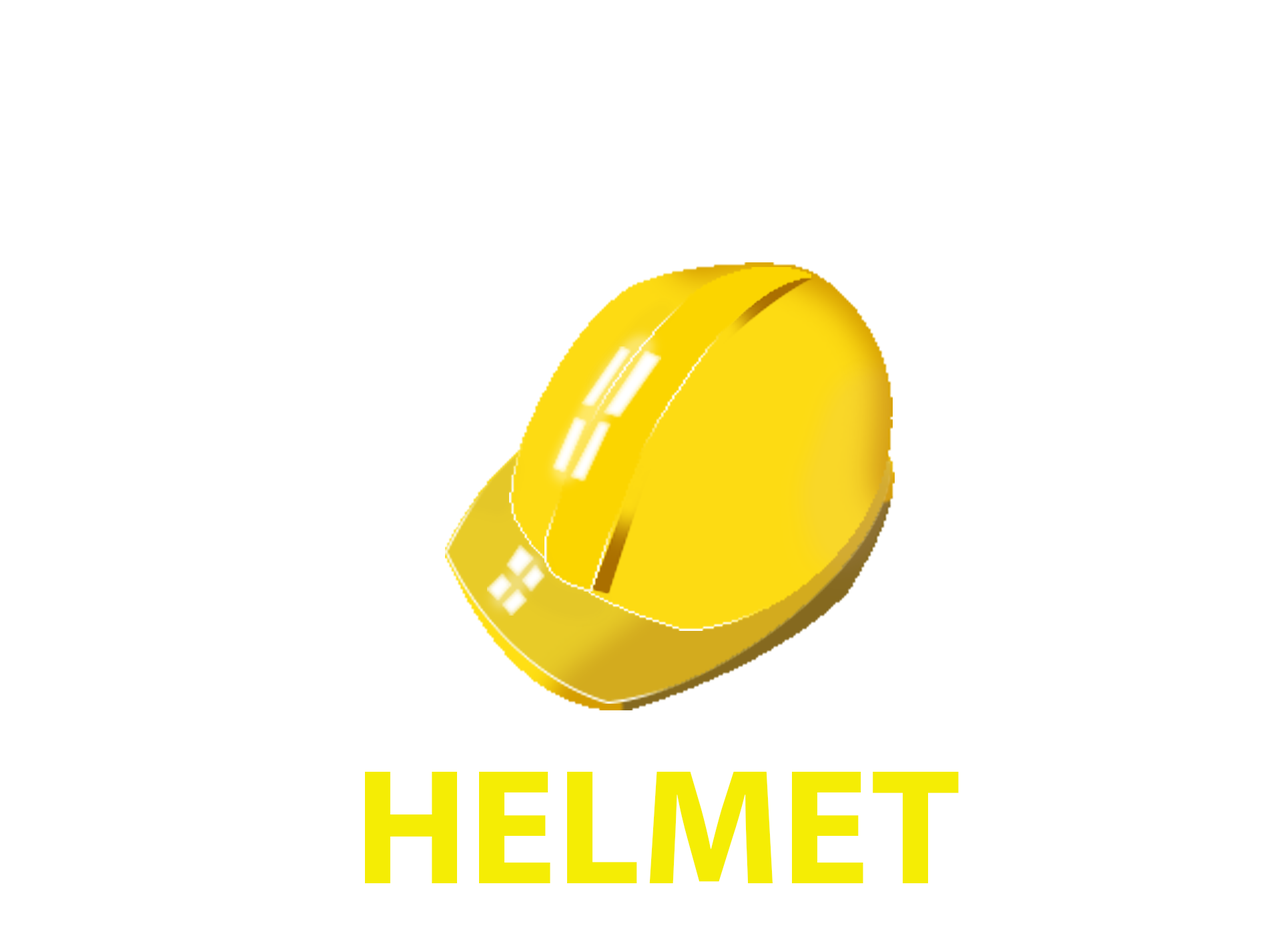
<style>
.page{position:relative;width:1261px;height:946px;background:#ffffff}
.page>*{position:absolute;margin:0}
.t1{font:165.4px "MyriadPro-Bold";color:#f5ed04}
</style>
<div class="page">
<p class="t1" style="left:365px;top:771px;width:594px;height:112px">HELMET</p>
</div>
